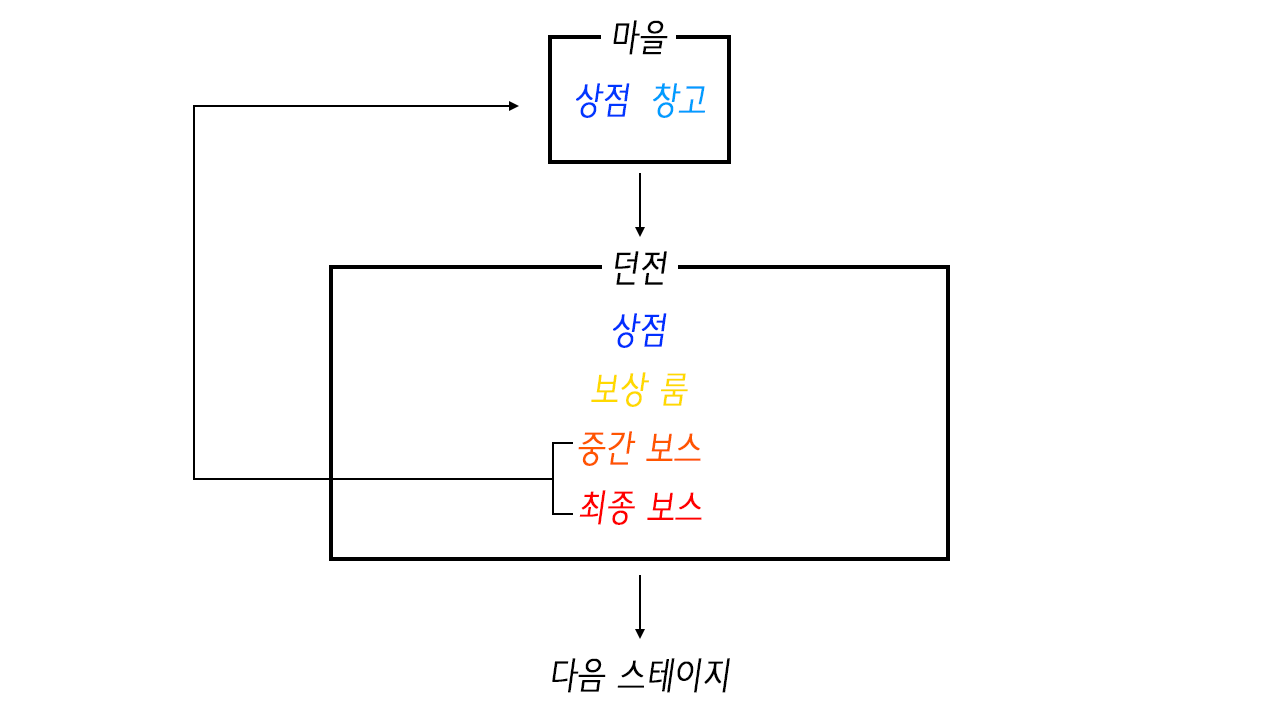
<style>
.page{position:relative;width:1280px;height:720px;background:#ffffff}
.page>*{position:absolute;margin:0}
.t1{font:36px "THEJung120";color:#000000;font-weight:bold;font-style:italic;scale:0.8 1}
.t2{font:36px "THEJung120";color:#0037ff;font-weight:bold;font-style:italic;scale:0.8 1}
.t3{font:36px "THEJung120";color:#009dff;font-weight:bold;font-style:italic;scale:0.8 1}
.t4{font:36px "THEJung120";color:#002fff;font-weight:bold;font-style:italic;scale:0.8 1}
.t5{font:36px "THEJung120";color:#ffd900;font-weight:bold;font-style:italic;scale:0.8 1}
.t6{font:36px "THEJung120";color:#ff5500;font-weight:bold;font-style:italic;scale:0.8 1}
.t7{font:36px "THEJung120";color:#ff0000;font-weight:bold;font-style:italic;scale:0.8 1}
</style>
<div class="page">
<p class="t1" style="left:613px;top:20px;width:55px;height:35px">마을</p>
<p class="t2" style="left:576px;top:83px;width:54px;height:35px">상점</p>
<p class="t3" style="left:653px;top:83px;width:52px;height:35px">창고</p>
<p class="t1" style="left:615px;top:251px;width:52px;height:34px">던전</p>
<p class="t4" style="left:613px;top:313px;width:54px;height:35px">상점</p>
<p class="t5" style="left:591px;top:372px;width:97px;height:35px">보상 룸</p>
<p class="t6" style="left:578px;top:431px;width:123px;height:35px">중간 보스</p>
<p class="t7" style="left:579px;top:490px;width:123px;height:35px">최종 보스</p>
<p class="t1" style="left:552px;top:658px;width:178px;height:35px">다음 스테이지</p>
</div>
